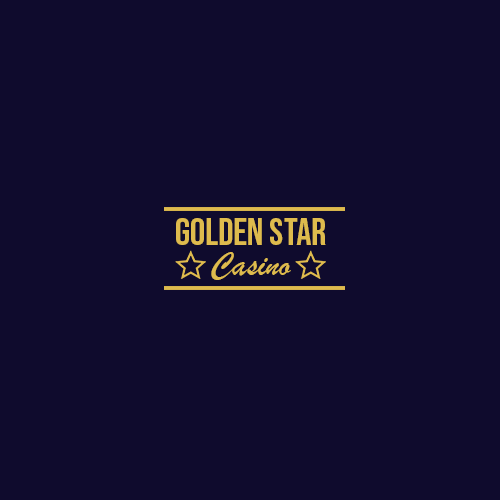
<style>
.page{position:relative;width:500px;height:500px;background:#0f0b2d}
.page>*{position:absolute;margin:0}
.t1{font:38px "BebasNeue-Regular";color:#debb4d}
.t2{font:36px "BrushScriptMT";color:#debb4d}
.t3{font:44px "BebasNeue-Regular";color:#debb4d}
</style>
<div class="page">
<p class="t1" style="left:176px;top:218px;width:150px;height:27px">GOLDEN STAR</p>
<p class="t2" style="left:211px;top:252px;width:80px;height:28px"><span class="t3"><br></span>Casino</p>
</div>
